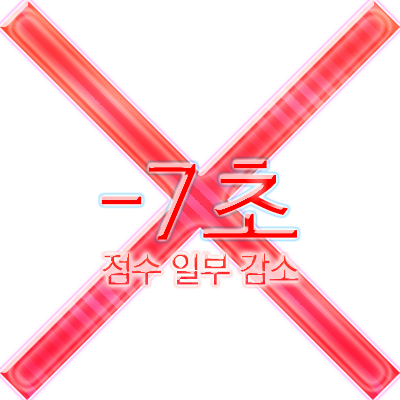
<style>
.page{position:relative;width:400px;height:400px;background:#ffffff}
.page>*{position:absolute;margin:0}
.t1{font:105px "HCRDotum";letter-spacing:-0.05em;font-weight:bold}
.t2{font:35px "KoPubWorldDotumLight";letter-spacing:-0.05em;font-weight:bold}
</style>
<div class="page">
<p class="t1" style="left:101px;top:160px;width:196px;height:80px">-7초</p>
<p class="t2" style="left:102px;top:253px;width:197px;height:32px">점수 일부 감소</p>
</div>
